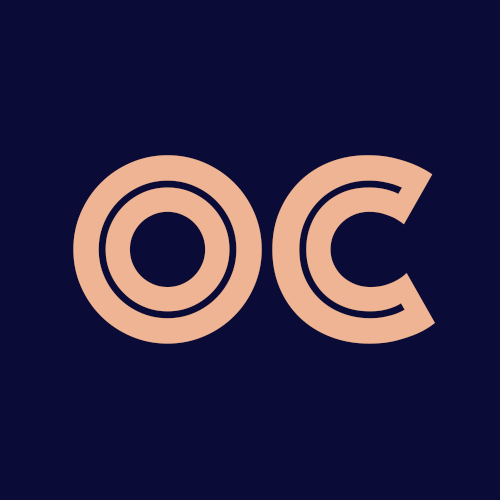
<style>
.page{position:relative;width:500px;height:500px;background:#0a0b37}
.page>*{position:absolute;margin:0}
.t1{font:268.8px "Phosphate-Inline";color:#eeb493}
</style>
<div class="page">
<p class="t1" style="left:73px;top:155px;width:362px;height:189px">OC</p>
</div>
